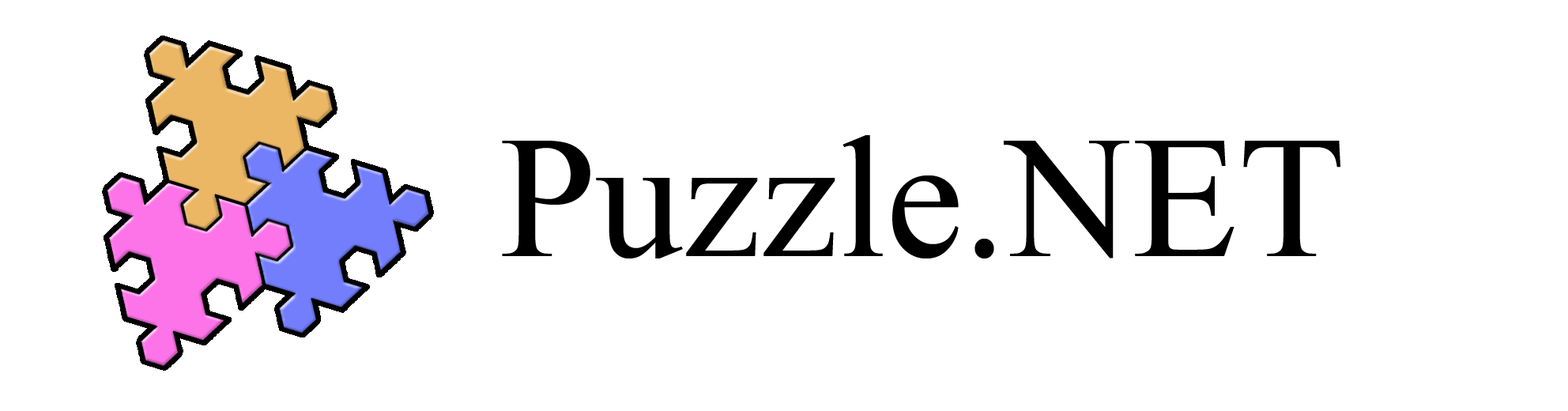
<style>
.page{position:relative;width:1568px;height:411px;background:#ffffff}
.page>*{position:absolute;margin:0}
.t1{font:173.9px "TimesNewRomanPSMT";color:#000000}
</style>
<div class="page">
<p class="t1" style="left:502px;top:135px;width:838px;height:123px">Puzzle.NET</p>
</div>
